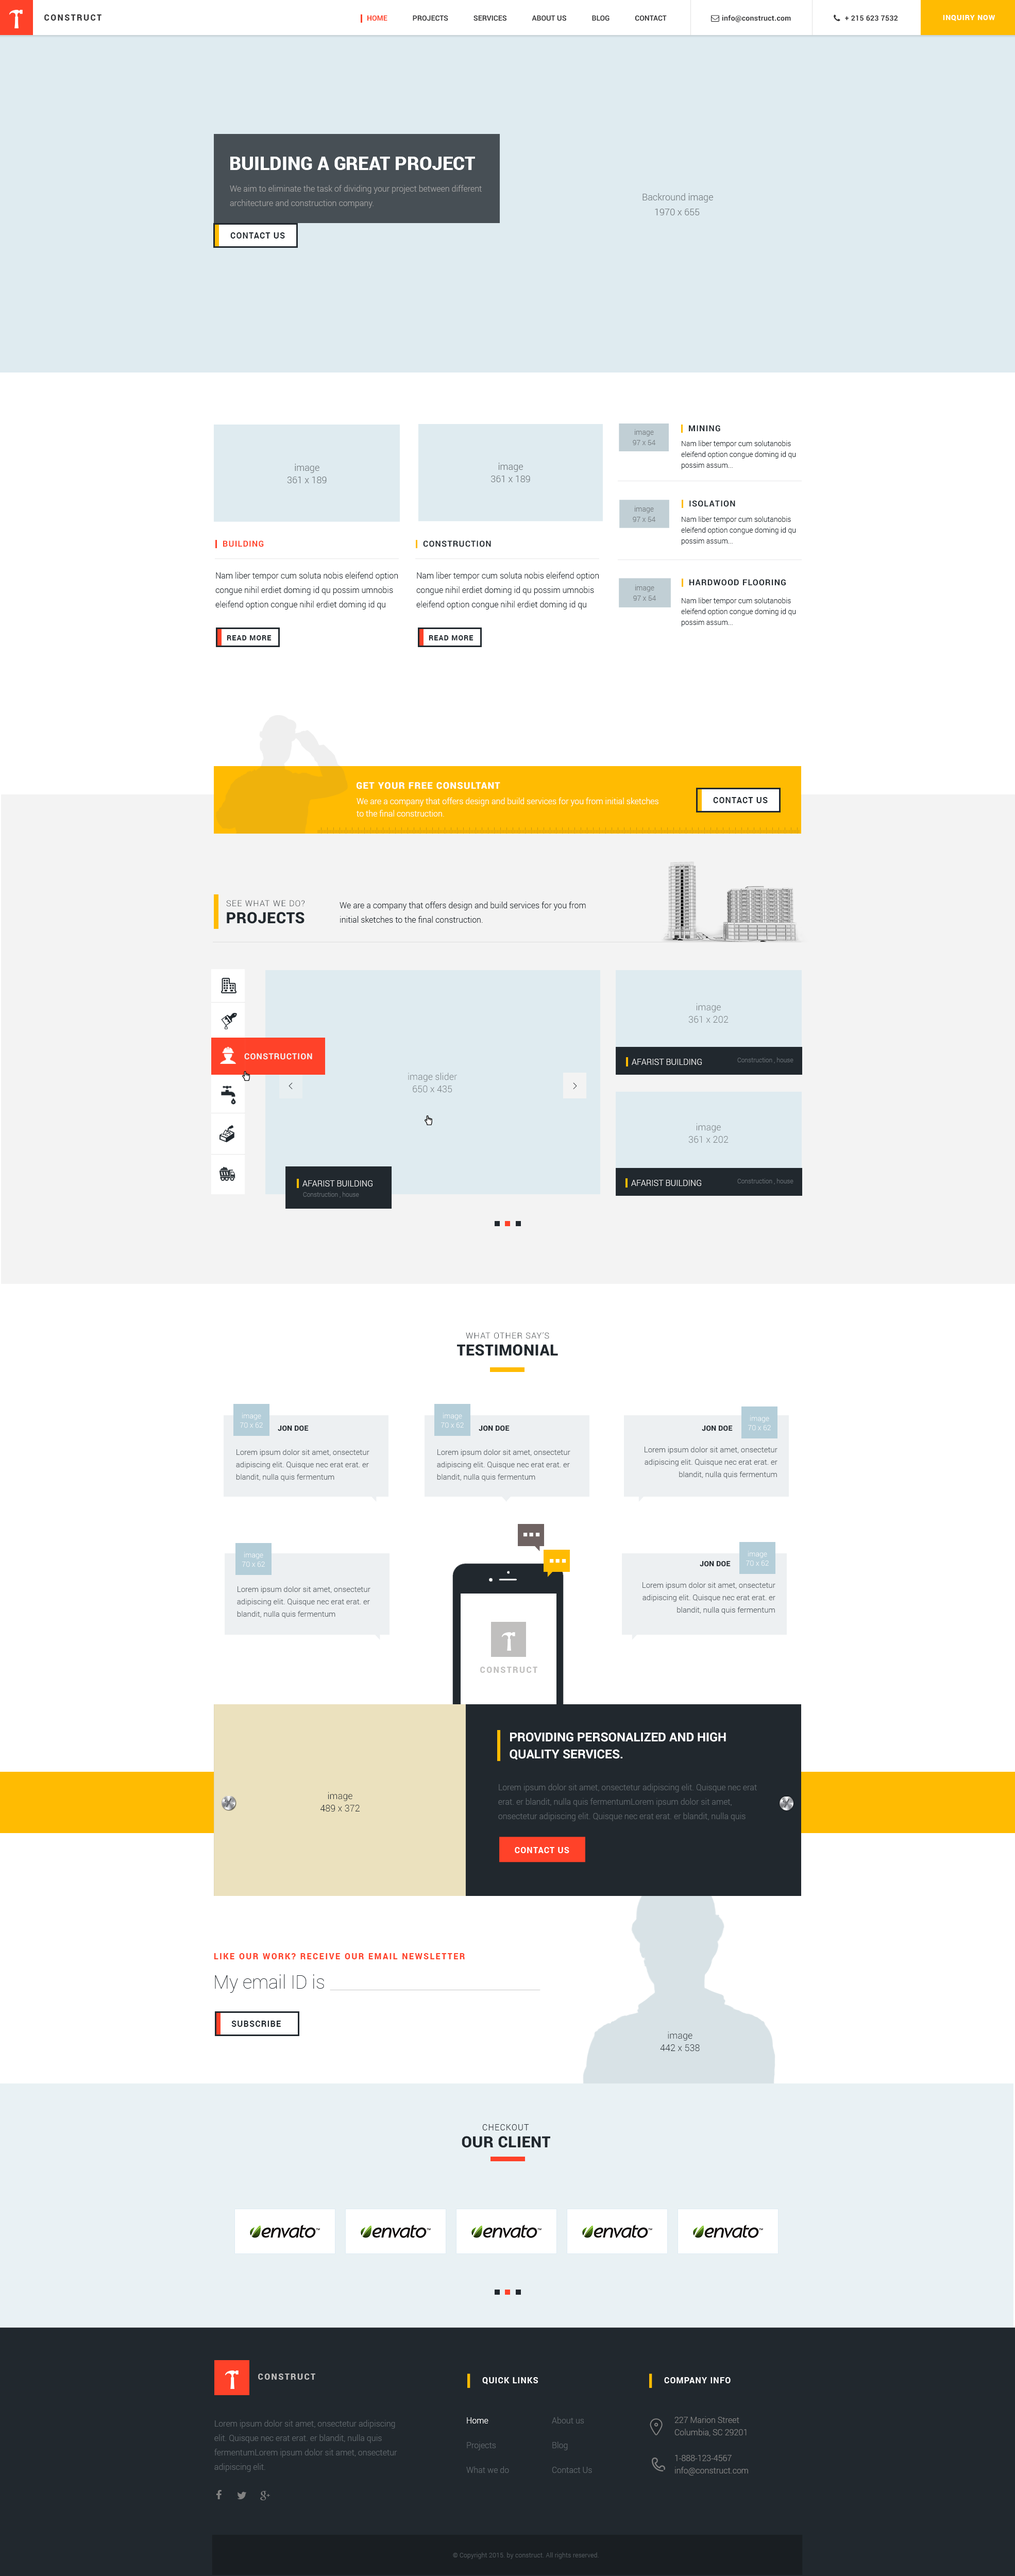
<style>
.page{position:relative;width:1015px;height:2576px;background:#ffffff}
.page>*{position:absolute;margin:0}
.t1{font:8.2px "Roboto-Black";letter-spacing:0.15em;color:#353537;text-transform:uppercase}
.t2{font:7.2px "Roboto-Bold";color:#353537}
.t3{font:7.2px "Roboto-Bold";color:#ff4229}
.t4{font:7.2px "Roboto-Bold";letter-spacing:0.025em;color:#353537}
.t5{font:7.2px "Roboto-Bold";letter-spacing:0.075em;color:#ffffff;text-transform:uppercase}
.t6{font:18.5px "Roboto-Black";color:#ffffff;text-transform:uppercase}
.t7{font:8.2px/14.4px "Roboto-Light";color:#a1a1a1}
.t8{font:9.3px "Roboto-Light";color:#767d81}
.t9{font:8.2px "Roboto-Bold";letter-spacing:0.075em;color:#21282e;text-transform:uppercase}
.t10{font:7.2px/10.3px "Roboto-Light";color:#767d81}
.t11{font:7.2px/10.8px "Roboto-Light";color:#21282e}
.t12{font:9.3px/12.4px "Roboto-Light";color:#767d81}
.t13{font:8.2px "Roboto-Bold";letter-spacing:0.075em;color:#ff4229;text-transform:uppercase}
.t14{font:8.2px/14.4px "Roboto-Light";color:#21282e}
.t15{font:7.2px "Roboto-Bold";letter-spacing:0.075em;color:#21282e;text-transform:uppercase}
.t16{font:9.3px "Roboto-Black";letter-spacing:0.075em;color:#ffffff;text-transform:uppercase}
.t17{font:8.2px/12.4px "Roboto-Light";color:#ffffff}
.t18{font:8.2px "Roboto-Light";letter-spacing:0.075em;color:#21282e;text-transform:uppercase}
.t19{font:15.5px "Roboto-Black";letter-spacing:0.02em;color:#21282e;text-transform:uppercase}
.t20{font:8.2px "Roboto-Bold";letter-spacing:0.075em;color:#f3f3f3;text-transform:uppercase}
.t21{font:8.2px "Roboto-Light";color:#f3f3f3;text-transform:uppercase}
.t22{font:6.2px "Roboto-Light";color:#656c72}
.t23{font:9.3px "Quicksand-Regular";letter-spacing:0.1em;color:#21282e}
.t24{font:7.2px/9.3px "Roboto-Light";color:#ffffff}
.t25{font:7.2px "Roboto-Black";letter-spacing:0.02em;color:#21282e;text-transform:uppercase}
.t26{font:7.7px/12.4px "Roboto-Light";color:#5e656a}
.t27{font:8.2px "Roboto-Black";letter-spacing:0.15em;color:#c0bfbe;text-transform:uppercase}
.t28{font:12.4px/17px "Roboto-Bold";color:#ffffff}
.t29{font:9.3px/12.4px "Roboto-Light";color:#21282e}
.t30{font:8.2px/14.4px "Roboto-Light";color:#5e656a}
.t31{font:8.2px "Roboto-Bold";letter-spacing:0.075em;color:#ffffff;text-transform:uppercase}
.t32{font:8.2px "Roboto-Black";letter-spacing:0.15em;color:#ff4229;text-transform:uppercase}
.t33{font:18.5px "Roboto-Thin";color:#21282e}
.t34{font:8.2px/24.7px "Roboto-Light";color:#5e656a}
.t35{font:8.2px/24.7px "Roboto-Light";color:#ffffff}
.t36{font:8.2px/12.4px "Roboto-Light";color:#828282}
.t37{font:6.2px "Roboto-Light";letter-spacing:0.025em;color:#52595e}
</style>
<div class="page">
<p class="t1" style="left:44px;top:14px;width:57px;height:7px">Construct</p>
<p class="t2" style="left:367px;top:15px;width:300px;height:6px"><span class="t3">HOME</span>              PROJECTS              SERVICES              ABOUT US              BLOG              CONTACT</p>
<p class="t4" style="left:722px;top:15px;width:69px;height:7px">info@construct.com</p>
<p class="t4" style="left:845px;top:15px;width:53px;height:6px">+ 215 623 7532</p>
<p class="t5" style="left:943px;top:15px;width:52px;height:6px">Inquiry Now</p>
<p class="t6" style="left:230px;top:157px;width:245px;height:13px">Building a great project</p>
<p class="t7" style="left:230px;top:185px;width:252px;height:23px">We aim to eliminate the task of dividing your project between different <br>architecture and construction company.</p>
<p class="t8" style="left:642px;top:193px;width:71px;height:9px">Backround image</p>
<p class="t8" style="left:655px;top:209px;width:45px;height:6px">1970 x 655</p>
<p class="t9" style="left:230px;top:232px;width:55px;height:7px">Contact US</p>
<p class="t9" style="left:689px;top:425px;width:31px;height:7px">Mining</p>
<p class="t10" style="left:633px;top:429px;width:23px;height:16px;text-align:center">image<br>97 x 54</p>
<p class="t11" style="left:681px;top:440px;width:115px;height:29px">Nam liber tempor cum solutanobis eleifend option congue doming id qu possim assum...</p>
<p class="t12" style="left:287px;top:464px;width:40px;height:19px;text-align:center">image<br>361 x 189</p>
<p class="t12" style="left:491px;top:463px;width:39px;height:19px;text-align:center">image<br>361 x 189</p>
<p class="t10" style="left:633px;top:506px;width:23px;height:16px;text-align:center">image<br>97 x 54</p>
<p class="t9" style="left:689px;top:500px;width:46px;height:7px">Isolation</p>
<p class="t11" style="left:681px;top:516px;width:115px;height:29px">Nam liber tempor cum solutanobis eleifend option congue doming id qu possim assum...</p>
<p class="t13" style="left:223px;top:540px;width:41px;height:7px">Building</p>
<p class="t9" style="left:423px;top:540px;width:68px;height:7px">Construction</p>
<p class="t14" style="left:215px;top:572px;width:183px;height:37px">Nam liber tempor cum soluta nobis eleifend option congue nihil erdiet doming id qu possim umnobis eleifend option congue nihil erdiet doming id qu possim</p>
<p class="t14" style="left:416px;top:572px;width:183px;height:37px">Nam liber tempor cum soluta nobis eleifend option congue nihil erdiet doming id qu possim umnobis eleifend option congue nihil erdiet doming id qu possim</p>
<p class="t9" style="left:689px;top:579px;width:97px;height:7px">Hardwood flooring</p>
<p class="t10" style="left:633px;top:585px;width:23px;height:16px;text-align:center">image<br>97 x 54</p>
<p class="t11" style="left:681px;top:598px;width:115px;height:28px">Nam liber tempor cum solutanobis eleifend option congue doming id qu possim assum...</p>
<p class="t15" style="left:227px;top:635px;width:45px;height:5px">Read More</p>
<p class="t15" style="left:429px;top:635px;width:44px;height:5px">Read More</p>
<p class="t16" style="left:357px;top:782px;width:143px;height:7px">Get Your Free Consultant</p>
<p class="t17" style="left:357px;top:798px;width:301px;height:19px">We are a company that offers design and build services for you from initial sketches <br>to the final construction.</p>
<p class="t9" style="left:713px;top:797px;width:55px;height:6px">Contact US</p>
<p class="t18" style="left:226px;top:900px;width:78px;height:7px">See What we Do?</p>
<p class="t14" style="left:340px;top:902px;width:246px;height:21px">We are a company that offers design and build services for you from initial sketches to the final construction.</p>
<p class="t19" style="left:227px;top:912px;width:77px;height:12px">Projects</p>
<p class="t12" style="left:689px;top:1003px;width:39px;height:20px;text-align:center">image<br>361 x 202</p>
<p class="t20" style="left:244px;top:1053px;width:68px;height:7px">Construction</p>
<p class="t21" style="left:632px;top:1059px;width:70px;height:6px">Afarist Building</p>
<p class="t22" style="left:737px;top:1057px;width:56px;height:6px">Construction , house</p>
<p class="t12" style="left:408px;top:1073px;width:49px;height:20px;text-align:center">image slider<br>650 x 435</p>
<p class="t23" style="left:289px;top:1082px;width:4px;height:7px;rotate:180deg">&gt;</p>
<p class="t23" style="left:573px;top:1082px;width:4px;height:7px">&gt;</p>
<p class="t12" style="left:689px;top:1123px;width:39px;height:20px;text-align:center">image<br>361 x 202</p>
<p class="t21" style="left:302px;top:1180px;width:70px;height:7px">Afarist Building</p>
<p class="t21" style="left:631px;top:1180px;width:70px;height:6px">Afarist Building</p>
<p class="t22" style="left:737px;top:1178px;width:56px;height:6px">Construction , house</p>
<p class="t22" style="left:303px;top:1192px;width:56px;height:6px">Construction , house</p>
<p class="t18" style="left:466px;top:1332px;width:83px;height:7px">What other say’s</p>
<p class="t19" style="left:457px;top:1344px;width:101px;height:12px">Testimonial</p>
<p class="t24" style="left:240px;top:1413px;width:23px;height:15px;text-align:center">image<br>70 x 62</p>
<p class="t24" style="left:441px;top:1413px;width:23px;height:15px;text-align:center">image<br>70 x 62</p>
<p class="t24" style="left:748px;top:1415px;width:23px;height:16px;text-align:center">image<br>70 x 62</p>
<p class="t25" style="left:278px;top:1426px;width:31px;height:5px">Jon Doe</p>
<p class="t25" style="left:479px;top:1426px;width:31px;height:5px">Jon Doe</p>
<p class="t25" style="left:702px;top:1426px;width:31px;height:5px">Jon Doe</p>
<p class="t26" style="left:236px;top:1449px;width:133px;height:32px">Lorem ipsum dolor sit amet, onsectetur adipiscing elit. Quisque nec erat erat. er blandit, nulla quis fermentum</p>
<p class="t26" style="left:437px;top:1449px;width:133px;height:32px">Lorem ipsum dolor sit amet, onsectetur adipiscing elit. Quisque nec erat erat. er blandit, nulla quis fermentum</p>
<p class="t26" style="left:645px;top:1447px;width:132px;height:32px;text-align:right">Lorem ipsum dolor sit amet, onsectetur adipiscing elit. Quisque nec erat erat. er blandit, nulla quis fermentum</p>
<p class="t24" style="left:242px;top:1552px;width:23px;height:15px;text-align:center">image<br>70 x 62</p>
<p class="t24" style="left:746px;top:1551px;width:23px;height:15px;text-align:center">image<br>70 x 62</p>
<p class="t25" style="left:700px;top:1561px;width:31px;height:6px">Jon Doe</p>
<p class="t26" style="left:237px;top:1586px;width:133px;height:32px">Lorem ipsum dolor sit amet, onsectetur adipiscing elit. Quisque nec erat erat. er blandit, nulla quis fermentum</p>
<p class="t26" style="left:642px;top:1582px;width:133px;height:32px;text-align:right">Lorem ipsum dolor sit amet, onsectetur adipiscing elit. Quisque nec erat erat. er blandit, nulla quis fermentum</p>
<p class="t27" style="left:480px;top:1667px;width:57px;height:6px">Construct</p>
<p class="t28" style="left:510px;top:1732px;width:216px;height:28px">PROVIDING PERSONALIZED AND HIGH <br>QUALITY SERVICES.</p>
<p class="t29" style="left:320px;top:1792px;width:40px;height:20px;text-align:center">image<br>489 x 372</p>
<p class="t30" style="left:498px;top:1784px;width:259px;height:37px">Lorem ipsum dolor sit amet, onsectetur adipiscing elit. Quisque nec erat erat. er blandit, nulla quis fermentumLorem ipsum dolor sit amet, onsectetur adipiscing elit. Quisque nec erat erat. er blandit, nulla quis fermentum</p>
<p class="t31" style="left:515px;top:1847px;width:54px;height:6px">Contact US</p>
<p class="t32" style="left:214px;top:1953px;width:251px;height:6px">Like our work? Receive our email newsletter</p>
<p class="t33" style="left:215px;top:1974px;width:109px;height:19px">My email ID is</p>
<p class="t9" style="left:231px;top:2021px;width:50px;height:6px">Subscribe</p>
<p class="t29" style="left:660px;top:2031px;width:40px;height:21px;text-align:center">image<br>442 x 538</p>
<p class="t18" style="left:482px;top:2124px;width:47px;height:6px">Checkout</p>
<p class="t19" style="left:462px;top:2136px;width:88px;height:12px">Our Client</p>
<p class="t27" style="left:258px;top:2374px;width:57px;height:6px">Construct</p>
<p class="t31" style="left:482px;top:2377px;width:56px;height:7px">Quick Links</p>
<p class="t31" style="left:664px;top:2377px;width:67px;height:6px">Company Info</p>
<p class="t34" style="left:466px;top:2417px;width:43px;height:56px"><span class="t35">Home<br></span>Projects<br>What we do</p>
<p class="t34" style="left:552px;top:2417px;width:40px;height:56px">About us<br>Blog<br>Contact Us</p>
<p class="t36" style="left:674px;top:2416px;width:73px;height:20px">227 Marion Street<br>Columbia, SC 29201</p>
<p class="t30" style="left:214px;top:2420px;width:183px;height:52px">Lorem ipsum dolor sit amet, onsectetur adipiscing elit. Quisque nec erat erat. er blandit, nulla quis fermentumLorem ipsum dolor sit amet, onsectetur adipiscing elit.</p>
<p class="t36" style="left:675px;top:2455px;width:73px;height:21px">1-888-123-4567<br>info@construct.com</p>
<p class="t37" style="left:453px;top:2552px;width:146px;height:7px">© Copyright 2015. by construct. All rights reserved.</p>
</div>
